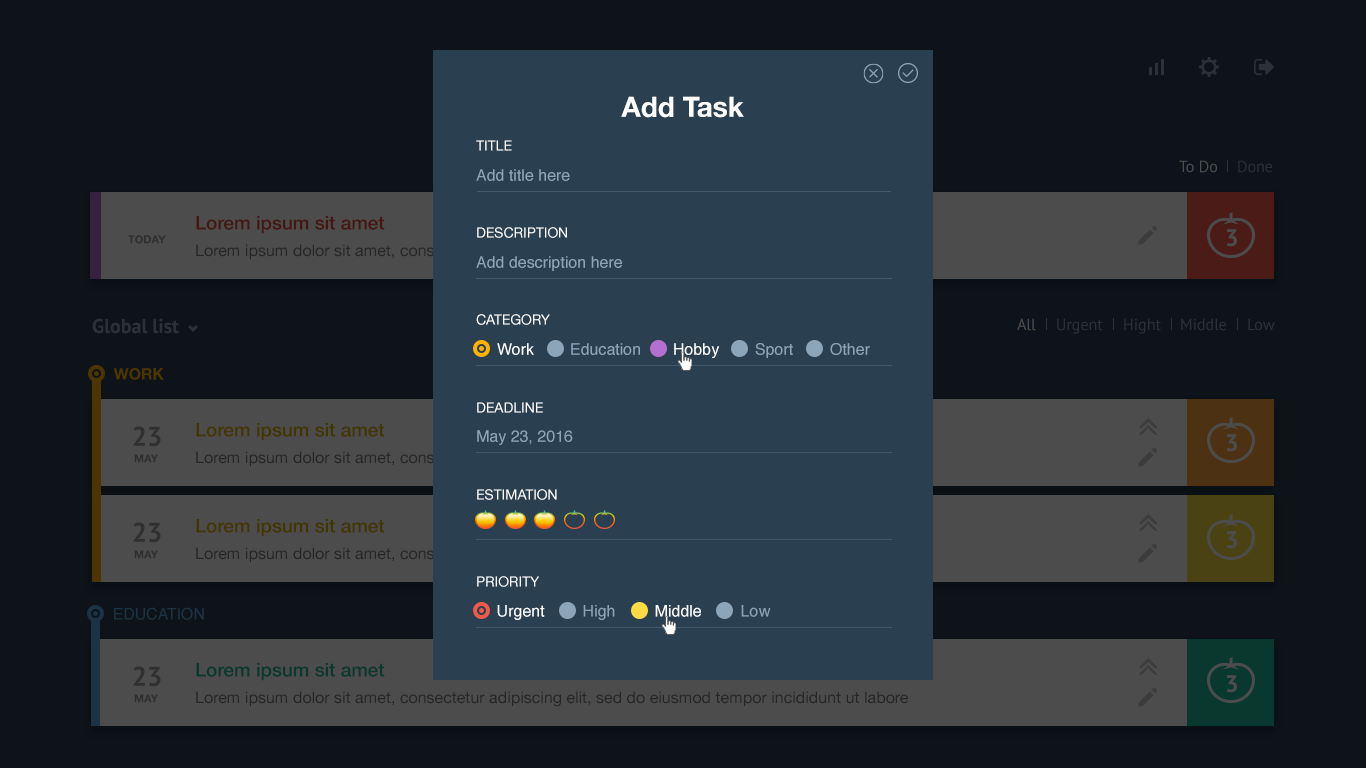
<style>
.page{position:relative;width:1366px;height:768px;background:#0d1318}
.page>*{position:absolute;margin:0}
.t1{font:28px "HelveticaNeue-Bold";color:#ffffff}
.t2{font:14px "HelveticaNeue";color:#ffffff;text-transform:uppercase}
.t3{font:16px "PTSans-Regular";color:#4c4c4c}
.t4{font:16px "PTSans-Regular";color:#293036}
.t5{font:16px "Helvetica";color:#8da5b8}
.t6{font:19px "HelveticaNeue-Medium";color:#451712}
.t7{font:24px "PTSans-Bold";color:#4c4c4c}
.t8{font:11px "HelveticaNeue-Bold";color:#2f2f2f}
.t9{font:16px "HelveticaNeue"}
.t10{font:20px "PTSans-Bold";color:#2a3137}
.t11{font:16px "PTSans-Regular";color:#2a3137}
.t12{font:16px "Helvetica";color:#ffffff}
.t13{font:15.8px "HelveticaNeueBold";color:#4c3500}
.t14{font:19px "HelveticaNeue-Medium";color:#423600}
.t15{font:27px "PTSans-Bold";color:#303030}
.t16{font:15.8px "Helvetica";color:#1b3344}
.t17{font:19px "HelveticaNeue-Medium";color:#08382e}
.t18{font:16px "HelveticaNeue";color:#262626}
</style>
<div class="page">
<p class="t1" style="left:621px;top:96px;width:123px;height:22px">Add Task</p>
<p class="t2" style="left:476px;top:140px;width:36px;height:11px">Title</p>
<p class="t3" style="left:1179px;top:160px;width:38px;height:13px">To Do</p>
<p class="t4" style="left:1238px;top:160px;width:34px;height:13px">Done</p>
<p class="t5" style="left:476px;top:169px;width:94px;height:12px">Add title here</p>
<p class="t6" style="left:196px;top:216px;width:189px;height:18px">Lorem ipsum sit amet</p>
<p class="t2" style="left:477px;top:227px;width:90px;height:11px">Description</p>
<p class="t7" style="left:1226px;top:229px;width:11px;height:18px">3</p>
<p class="t8" style="left:128px;top:235px;width:38px;height:9px">TODAY</p>
<p class="t9" style="left:196px;top:244px;width:712px;height:16px">Lorem ipsum dolor sit amet, consectetur adipiscing elit, sed do eiusmod tempor incididunt ut labore</p>
<p class="t5" style="left:476px;top:256px;width:146px;height:15px">Add description here</p>
<p class="t10" style="left:92px;top:318px;width:87px;height:16px">Global list</p>
<p class="t2" style="left:476px;top:314px;width:74px;height:11px">Category</p>
<p class="t3" style="left:1017px;top:318px;width:19px;height:13px">All</p>
<p class="t11" style="left:1057px;top:318px;width:46px;height:16px">Urgent</p>
<p class="t11" style="left:1124px;top:318px;width:37px;height:16px">Hight</p>
<p class="t11" style="left:1181px;top:318px;width:45px;height:13px">Middle</p>
<p class="t11" style="left:1248px;top:318px;width:27px;height:13px">Low</p>
<p class="t12" style="left:497px;top:343px;width:37px;height:12px">Work</p>
<p class="t5" style="left:571px;top:343px;width:69px;height:12px">Education</p>
<p class="t12" style="left:674px;top:343px;width:45px;height:15px">Hobby</p>
<p class="t5" style="left:755px;top:343px;width:38px;height:15px">Sport</p>
<p class="t5" style="left:830px;top:343px;width:40px;height:12px">Other</p>
<p class="t13" style="left:113px;top:368px;width:51px;height:12px">WORK</p>
<p class="t2" style="left:477px;top:402px;width:66px;height:11px">Deadline</p>
<p class="t14" style="left:196px;top:423px;width:189px;height:18px">Lorem ipsum sit amet</p>
<p class="t15" style="left:133px;top:426px;width:28px;height:21px">23</p>
<p class="t5" style="left:477px;top:430px;width:96px;height:15px">May 23, 2016</p>
<p class="t7" style="left:1226px;top:434px;width:11px;height:18px">3</p>
<p class="t8" style="left:134px;top:454px;width:25px;height:9px">MAY</p>
<p class="t9" style="left:196px;top:451px;width:712px;height:16px">Lorem ipsum dolor sit amet, consectetur adipiscing elit, sed do eiusmod tempor incididunt ut labore</p>
<p class="t2" style="left:477px;top:489px;width:80px;height:11px">ESTIMATION</p>
<p class="t14" style="left:196px;top:519px;width:189px;height:18px">Lorem ipsum sit amet</p>
<p class="t15" style="left:133px;top:522px;width:28px;height:21px">23</p>
<p class="t7" style="left:1226px;top:531px;width:11px;height:18px">3</p>
<p class="t8" style="left:134px;top:550px;width:25px;height:9px">MAY</p>
<p class="t9" style="left:196px;top:547px;width:712px;height:16px">Lorem ipsum dolor sit amet, consectetur adipiscing elit, sed do eiusmod tempor incididunt ut labore</p>
<p class="t2" style="left:477px;top:576px;width:62px;height:11px">Priority</p>
<p class="t12" style="left:497px;top:605px;width:48px;height:15px">Urgent</p>
<p class="t5" style="left:583px;top:605px;width:32px;height:15px">High</p>
<p class="t12" style="left:655px;top:605px;width:46px;height:12px">Middle</p>
<p class="t5" style="left:741px;top:605px;width:30px;height:12px">Low</p>
<p class="t16" style="left:114px;top:607px;width:90px;height:13px">EDUCATION</p>
<p class="t17" style="left:196px;top:663px;width:189px;height:18px">Lorem ipsum sit amet</p>
<p class="t15" style="left:133px;top:666px;width:28px;height:21px">23</p>
<p class="t7" style="left:1226px;top:675px;width:11px;height:18px">3</p>
<p class="t8" style="left:134px;top:694px;width:25px;height:9px">MAY</p>
<p class="t18" style="left:196px;top:691px;width:712px;height:16px">Lorem ipsum dolor sit amet, consectetur adipiscing elit, sed do eiusmod tempor incididunt ut labore</p>
</div>
